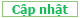
<style>
.page{position:relative;width:80px;height:18px;background:#ffffff}
.page>*{position:absolute;margin:0}
.t1{font:12.5px "Tahoma-Bold";color:#16bc58}
</style>
<div class="page">
<p class="t1" style="left:12px;top:4px;width:56px;height:12px">Cập nhật</p>
</div>
